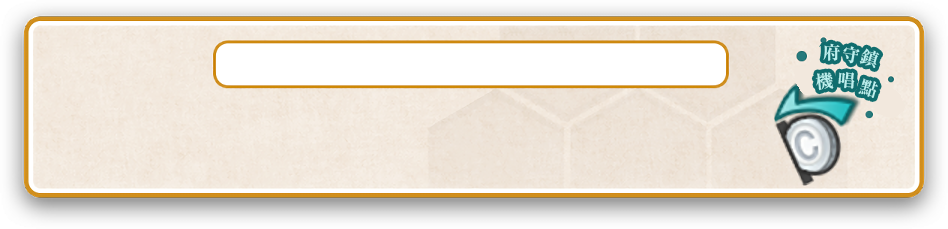
<style>
.page{position:relative;width:948px;height:229px}
.page>*{position:absolute;margin:0}
.t1{font:18px "RyuminPr6N-ExBold";color:#bbf0ee}
</style>
<div class="page">
<p class="t1" style="left:823px;top:43px;width:18px;height:18px">府</p>
<p class="t1" style="left:843px;top:46px;width:17px;height:18px;rotate:9deg">守</p>
<p class="t1" style="left:859px;top:48px;width:21px;height:20px;rotate:17deg">鎮</p>
<p class="t1" style="left:815px;top:72px;width:19px;height:19px;rotate:-6deg">機</p>
<p class="t1" style="left:838px;top:72px;width:17px;height:17px;rotate:5deg">唱</p>
<p class="t1" style="left:858px;top:78px;width:20px;height:20px;rotate:17deg">點</p>
</div>
